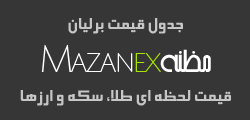
<style>
.page{position:relative;width:250px;height:120px;background:#363636}
.page>*{position:absolute;margin:0}
.t1{font:20px/24px "BElham";color:#c6c6c6}
</style>
<div class="page">
<p class="t1" style="left:20px;top:18px;width:211px;height:88px;text-align:center">جدول قیمت برلیان<br><br><br>قیمت لحظه ای طلا، سکه و ارزها</p>
</div>
